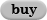
<style>
.page{position:relative;width:47px;height:20px;background:#bdbdbd}
.page>*{position:absolute;margin:0}
.t1{font:14px "CenturySchoolbook-Bold";color:#010000}
</style>
<div class="page">
<p class="t1" style="left:11px;top:4px;width:27px;height:13px">buy</p>
</div>
